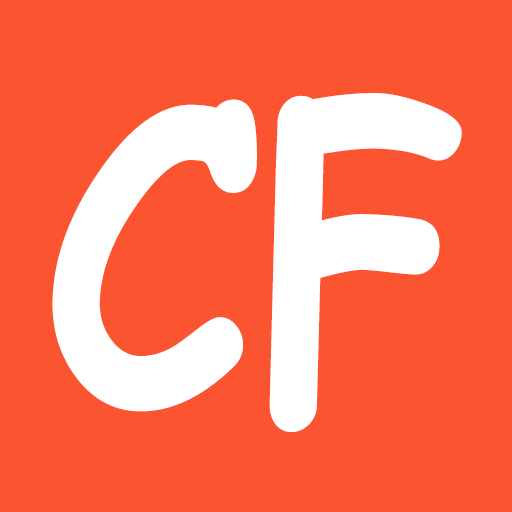
<style>
.page{position:relative;width:512px;height:512px;background:#fb5430}
.page>*{position:absolute;margin:0}
.t1{font:415.8px "ComicSansMS-Bold";color:#ffffff;scale:0.83 1}
</style>
<div class="page">
<p class="t1" style="left:52px;top:93px;width:410px;height:339px;rotate:2deg">CF</p>
</div>
